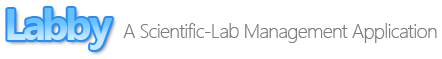
<style>
.page{position:relative;width:442px;height:59px;background:#ffffff}
.page>*{position:absolute;margin:0}
.t1{font:20px "SegoeUI-Light";letter-spacing:-0.04em;color:#7e7e7e}
</style>
<div class="page">
<p class="t1" style="left:123px;top:23px;width:314px;height:20px">A Scientific-Lab Management Application</p>
</div>
